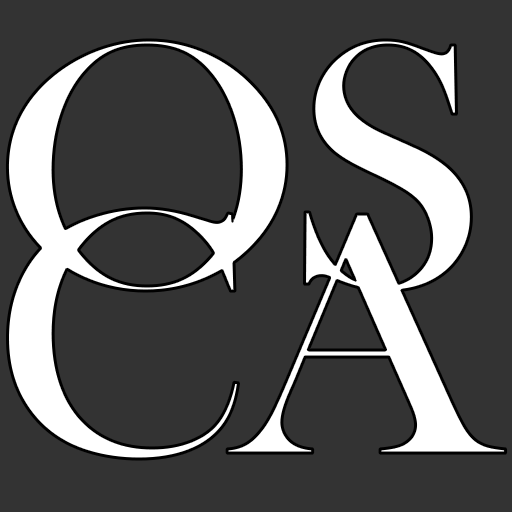
<style>
.page{position:relative;width:512px;height:512px;background:#333333}
.page>*{position:absolute;margin:0}
.t1{font:358px/168px "BaskOldFace";letter-spacing:-0.05em;color:#ffffff;scale:1.09 1}
</style>
<div class="page">
<p class="t1" style="left:7px;top:40px;width:499px;height:419px">OS<br>CA</p>
</div>
